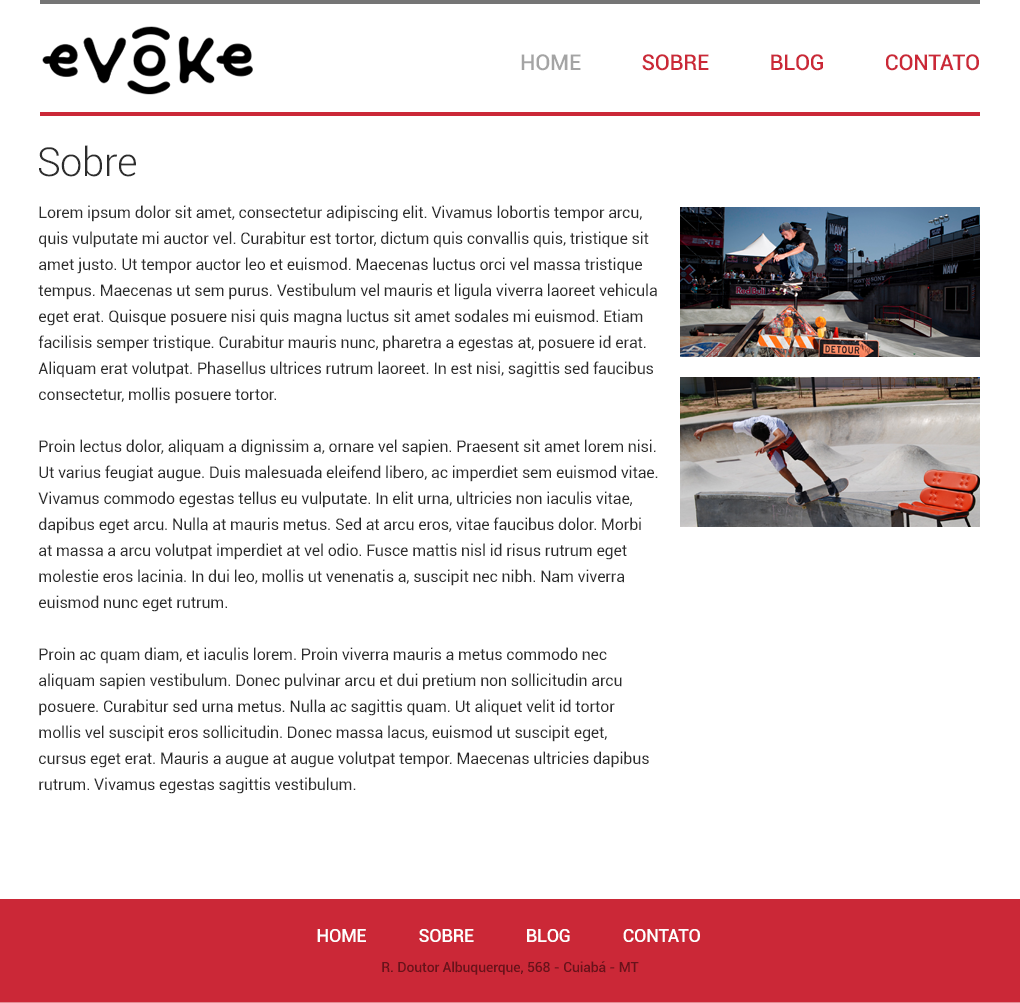
<style>
.page{position:relative;width:1020px;height:1003px;background:#ffffff}
.page>*{position:absolute;margin:0}
.t1{font:22px "Roboto-Medium";letter-spacing:-0.01em;color:#cb2837;text-transform:uppercase}
.t2{font:22px "Roboto-Medium";letter-spacing:-0.01em;color:#a4a4a4;text-transform:uppercase}
.t3{font:40px "Roboto-Light";letter-spacing:-0.01em;color:#2d2d2d}
.t4{font:16px/26px "Roboto-Regular";letter-spacing:-0.01em;color:#2d2d2d}
.t5{font:18px "Roboto-Medium";letter-spacing:-0.01em;color:#ffffff;text-transform:uppercase}
.t6{font:14px "Roboto-Medium";letter-spacing:-0.01em;color:#69121a}
</style>
<div class="page">
<p class="t1" style="left:521px;top:54px;width:458px;height:17px"><span class="t2">Home</span> Sobre Blog Contato</p>
<p class="t3" style="left:39px;top:145px;width:97px;height:32px">Sobre</p>
<p class="t4" style="left:38px;top:205px;width:620px;height:589px">Lorem ipsum dolor sit amet, consectetur adipiscing elit. Vivamus lobortis tempor arcu, quis vulputate mi auctor vel. Curabitur est tortor, dictum quis convallis quis, tristique sit amet justo. Ut tempor auctor leo et euismod. Maecenas luctus orci vel massa tristique tempus. Maecenas ut sem purus. Vestibulum vel mauris et ligula viverra laoreet vehicula eget erat. Quisque posuere nisi quis magna luctus sit amet sodales mi euismod. Etiam facilisis semper tristique. Curabitur mauris nunc, pharetra a egestas at, posuere id erat. Aliquam erat volutpat. Phasellus ultrices rutrum laoreet. In est nisi, sagittis sed faucibus consectetur, mollis posuere tortor.<br><br>Proin lectus dolor, aliquam a dignissim a, ornare vel sapien. Praesent sit amet lorem nisi. Ut varius feugiat augue. Duis malesuada eleifend libero, ac imperdiet sem euismod vitae. Vivamus commodo egestas tellus eu vulputate. In elit urna, ultricies non iaculis vitae, dapibus eget arcu. Nulla at mauris metus. Sed at arcu eros, vitae faucibus dolor. Morbi at massa a arcu volutpat imperdiet at vel odio. Fusce mattis nisl id risus rutrum eget molestie eros lacinia. In dui leo, mollis ut venenatis a, suscipit nec nibh. Nam viverra euismod nunc eget rutrum.<br><br>Proin ac quam diam, et iaculis lorem. Proin viverra mauris a metus commodo nec aliquam sapien vestibulum. Donec pulvinar arcu et dui pretium non sollicitudin arcu posuere. Curabitur sed urna metus. Nulla ac sagittis quam. Ut aliquet velit id tortor mollis vel suscipit eros sollicitudin. Donec massa lacus, euismod ut suscipit eget, cursus eget erat. Mauris a augue at augue volutpat tempor. Maecenas ultricies dapibus rutrum. Vivamus egestas sagittis vestibulum.</p>
<p class="t5" style="left:317px;top:929px;width:383px;height:13px">Home Sobre Blog Contato</p>
<p class="t6" style="left:382px;top:961px;width:257px;height:14px">R. Doutor Albuquerque, 568 - Cuiabá - MT</p>
</div>
